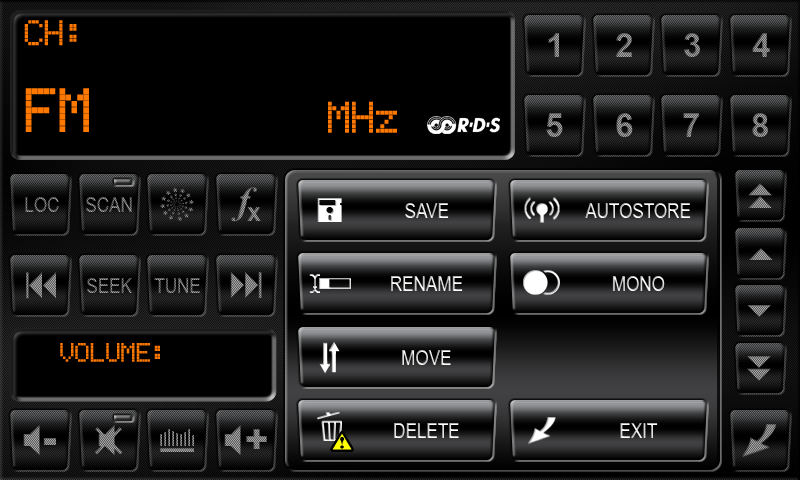
<style>
.page{position:relative;width:800px;height:480px;background:#000000}
.page>*{position:absolute;margin:0}
.t1{font:33.3px "EricssonGA628";color:#ff7800}
.t2{font:58.3px "EricssonGA628";color:#ff7800;scale:0.94 1}
.t3{font:41.7px "EricssonGA628";color:#ff7800;scale:0.94 1}
.t4{font:20.8px "ArialNarrow"}
.t5{font:25px "EricssonGA628";color:#ff7800}
</style>
<div class="page">
<p class="t1" style="left:24px;top:20px;width:53px;height:26px">CH:</p>
<p class="t2" style="left:25px;top:88px;width:64px;height:44px">FM</p>
<p class="t3" style="left:328px;top:101px;width:69px;height:32px">MHz</p>
<p class="t4" style="left:405px;top:203px;width:44px;height:15px">SAVE</p>
<p class="t4" style="left:585px;top:203px;width:106px;height:15px">AUTOSTORE</p>
<p class="t4" style="left:391px;top:276px;width:72px;height:15px">RENAME</p>
<p class="t4" style="left:612px;top:276px;width:53px;height:15px">MONO</p>
<p class="t5" style="left:60px;top:343px;width:100px;height:19px">VOLUME:</p>
<p class="t4" style="left:402px;top:350px;width:49px;height:15px">MOVE</p>
<p class="t4" style="left:394px;top:423px;width:65px;height:15px">DELETE</p>
<p class="t4" style="left:620px;top:423px;width:38px;height:15px">EXIT</p>
</div>
